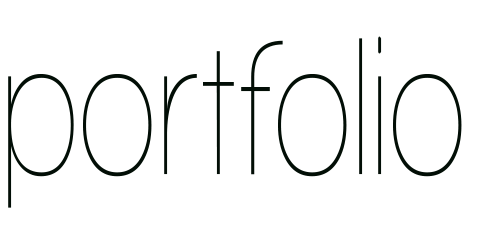
<style>
.page{position:relative;width:480px;height:231px;background:#ffffff}
.page>*{position:absolute;margin:0}
.t1{font:200px "WalkwayCondensed";color:#020e06}
</style>
<div class="page">
<p class="t1" style="left:8px;top:36px;width:454px;height:172px">portfolio</p>
</div>
